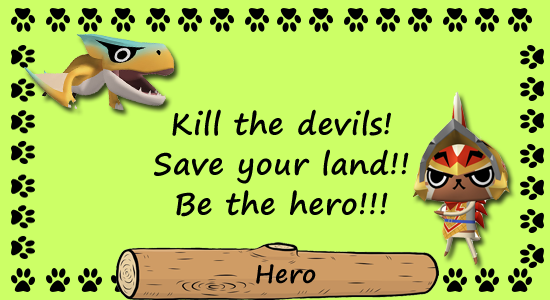
<style>
.page{position:relative;width:550px;height:300px;background:#ccff66}
.page>*{position:absolute;margin:0}
.t1{font:30px/40px "SegoePrint-Bold";letter-spacing:0.025em;color:#000000}
.t2{font:20px/30px "SegoePrint-Bold";letter-spacing:0.025em;color:#000000}
.t3{font:25px "SegoePrint-Bold";letter-spacing:0.025em;color:#000000}
</style>
<div class="page">
<p class="t1" style="left:154px;top:109px;width:255px;height:108px;text-align:center"><span class="t2"><br></span>Kill the devils!<br>Save your land!!<br>Be the hero!!!</p>
<p class="t3" style="left:256px;top:264px;width:60px;height:20px">Hero</p>
</div>
